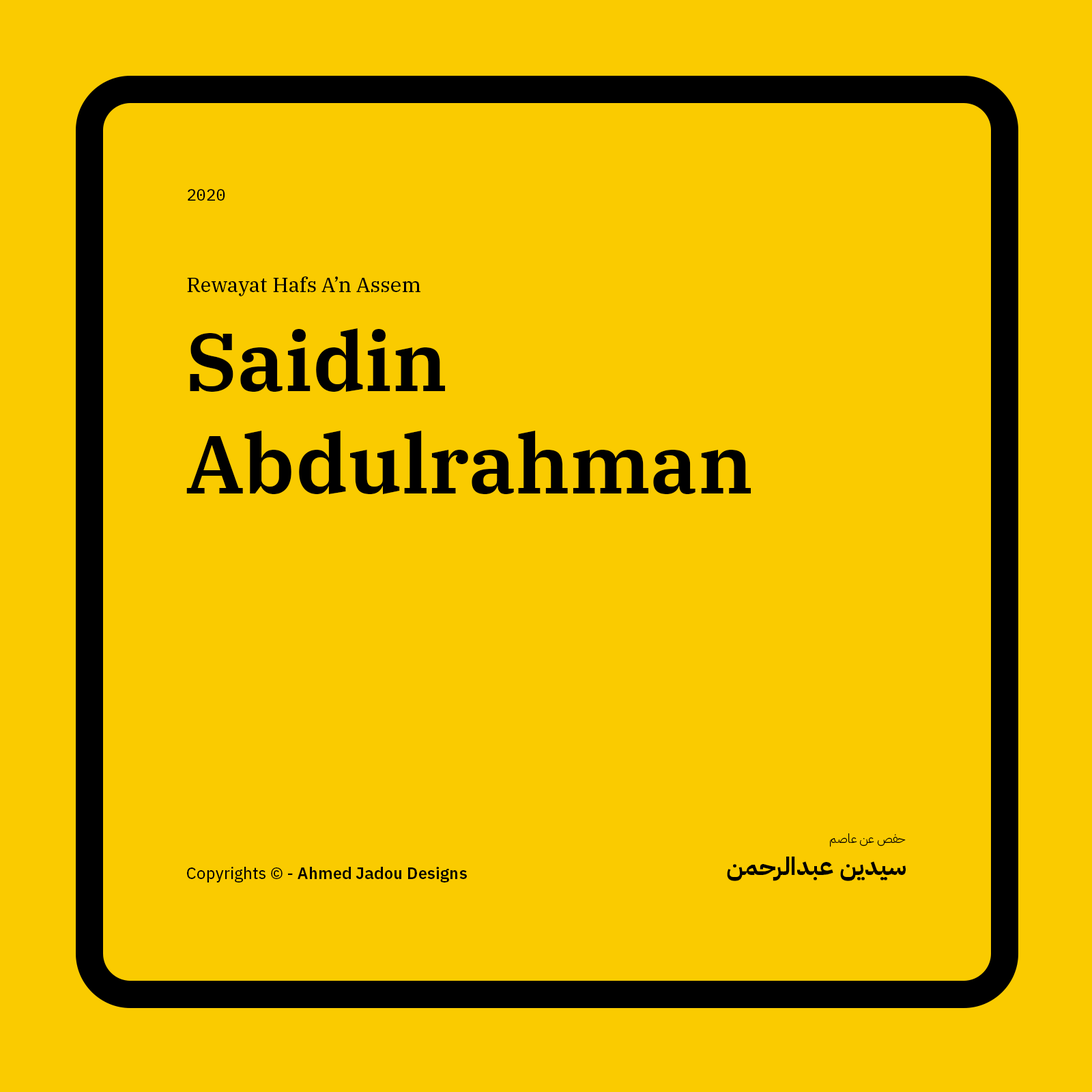
<style>
.page{position:relative;width:1092px;height:1092px;background:#facb00}
.page>*{position:absolute;margin:0}
.t1{font:16.4px "IBMPlexMono-Text";color:#000000}
.t2{font:20.5px "IBMPlexSerif-Text";color:#000000}
.t3{font:81.9px/102.7px "IBMPlexSerif-SemiBold";color:#000000}
.t4{font:12.3px "IBMPlexArabic-Light";color:#000000}
.t5{font:24.6px "IBMPlexArabic-Bold";color:#000000}
.t6{font:16.4px "IBMPlexSans-SemiBold";color:#000000}
.t7{font:16.4px "IBMPlexSans-Text";color:#000000}
</style>
<div class="page">
<p class="t1" style="left:188px;top:189px;width:37px;height:12px">2020</p>
<p class="t2" style="left:187px;top:276px;width:233px;height:20px">Rewayat Hafs A’n Assem</p>
<p class="t3" style="left:186px;top:328px;width:565px;height:166px">Saidin Abdulrahman</p>
<p class="t4" style="left:830px;top:833px;width:76px;height:14px">حفص عن عاصم</p>
<p class="t5" style="left:727px;top:857px;width:179px;height:24px">سيدين عبدالرحمن</p>
<p class="t6" style="left:187px;top:867px;width:280px;height:15px"><span class="t7">Copyrights © - </span>Ahmed Jadou Designs</p>
</div>
